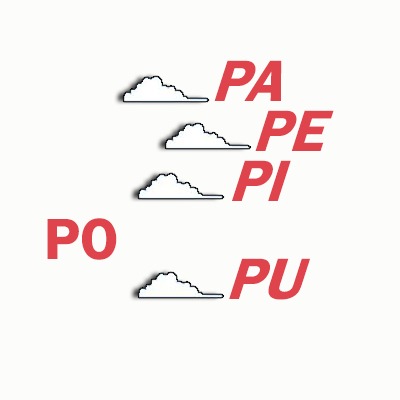
<style>
.page{position:relative;width:400px;height:400px;background:#fcfcfb}
.page>*{position:absolute;margin:0}
.t1{font:63px "FranklinGothic-Demi";color:#df444c;scale:0.95 1}
.t2{font:60px "FranklinGothic-Demi";color:#df444c}
</style>
<div class="page">
<p class="t1" style="left:214px;top:60px;width:68px;height:41px">PA</p>
<p class="t1" style="left:255px;top:110px;width:79px;height:41px">PE</p>
<p class="t1" style="left:232px;top:160px;width:59px;height:41px">PI</p>
<p class="t2" style="left:47px;top:218px;width:70px;height:42px">PO</p>
<p class="t1" style="left:229px;top:258px;width:81px;height:42px">PU</p>
</div>
